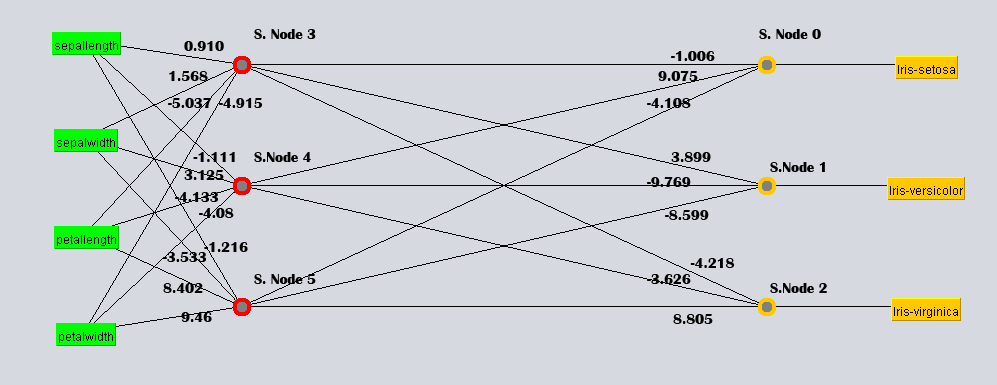
<style>
.page{position:relative;width:997px;height:385px;background:#d6d9df}
.page>*{position:absolute;margin:0}
.t1{font:14.7px "BritannicBold";color:#000000}
</style>
<div class="page">
<p class="t1" style="left:254px;top:29px;width:62px;height:10px">S. Node 3</p>
<p class="t1" style="left:759px;top:29px;width:62px;height:10px">S. Node 0</p>
<p class="t1" style="left:184px;top:41px;width:40px;height:10px">0.910</p>
<p class="t1" style="left:671px;top:51px;width:44px;height:10px">-1.006</p>
<p class="t1" style="left:169px;top:71px;width:39px;height:10px">1.568</p>
<p class="t1" style="left:658px;top:71px;width:40px;height:10px">9.075</p>
<p class="t1" style="left:168px;top:98px;width:43px;height:10px">-5.037</p>
<p class="t1" style="left:219px;top:98px;width:44px;height:10px">-4.915</p>
<p class="t1" style="left:647px;top:98px;width:44px;height:10px">-4.108</p>
<p class="t1" style="left:193px;top:152px;width:42px;height:10px">-1.111</p>
<p class="t1" style="left:254px;top:152px;width:57px;height:10px">S.Node 4</p>
<p class="t1" style="left:671px;top:152px;width:40px;height:10px">3.899</p>
<p class="t1" style="left:184px;top:170px;width:40px;height:10px">3.125</p>
<p class="t1" style="left:770px;top:162px;width:55px;height:10px">S.Node 1</p>
<p class="t1" style="left:647px;top:177px;width:44px;height:10px">-9.769</p>
<p class="t1" style="left:175px;top:192px;width:43px;height:10px">-4.133</p>
<p class="t1" style="left:199px;top:208px;width:35px;height:10px">-4.08</p>
<p class="t1" style="left:665px;top:210px;width:44px;height:10px">-8.599</p>
<p class="t1" style="left:204px;top:242px;width:44px;height:10px">-1.216</p>
<p class="t1" style="left:163px;top:252px;width:43px;height:10px">-3.533</p>
<p class="t1" style="left:690px;top:258px;width:45px;height:10px">-4.218</p>
<p class="t1" style="left:254px;top:274px;width:62px;height:10px">S. Node 5</p>
<p class="t1" style="left:647px;top:274px;width:44px;height:10px">-3.626</p>
<p class="t1" style="left:163px;top:283px;width:40px;height:10px">8.402</p>
<p class="t1" style="left:770px;top:283px;width:57px;height:10px">S.Node 2</p>
<p class="t1" style="left:181px;top:312px;width:31px;height:10px">9.46</p>
<p class="t1" style="left:673px;top:314px;width:40px;height:10px">8.805</p>
</div>
